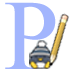
<style>
.page{position:relative;width:72px;height:72px;background:#ffffff}
.page>*{position:absolute;margin:0}
.t1{font:100px "TimesNewRomanPSMT";color:#a3b6fd}
</style>
<div class="page">
<p class="t1" style="left:5px;top:2px;width:51px;height:67px">P</p>
</div>
